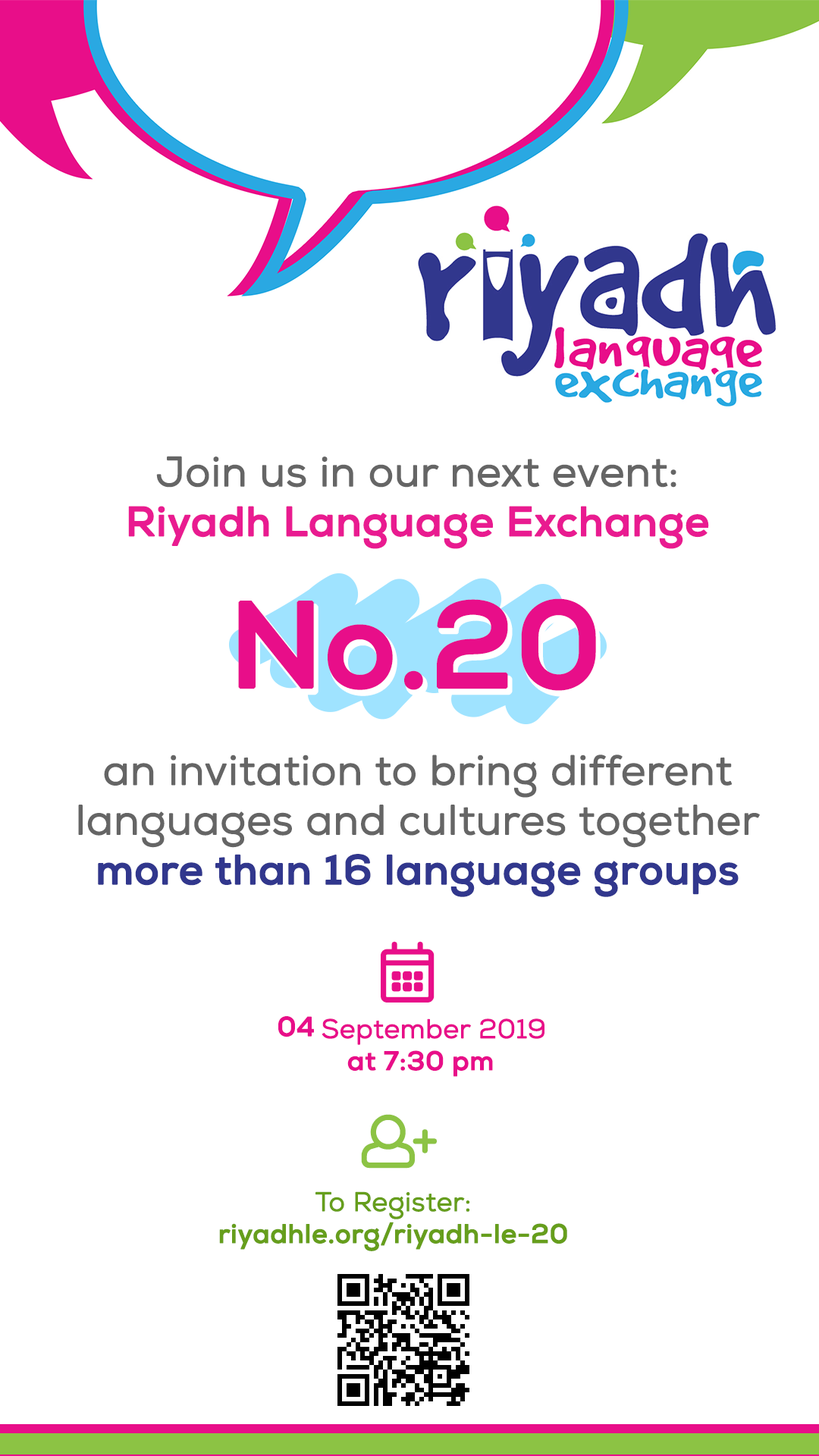
<style>
.page{position:relative;width:819px;height:1456px;background:#ffffff}
.page>*{position:absolute;margin:0}
.t1{font:41.5px "Nexa-Book";color:#656565;font-weight:bold}
.t2{font:41.5px "Nexa-Bold";color:#e91b90;font-weight:bold}
.t3{font:41.5px "Nexa-Bold";color:#31378d;font-weight:bold}
.t4{font:120.8px "Nexa-Bold";color:#e80e89;font-weight:bold}
.t5{font:27px "Nexa-Bold";color:#e80e89;font-weight:bold}
.t6{font:26.6px "Nexa-Book";color:#e80e89;font-weight:bold}
.t7{font:26.5px "Nexa-Bold";color:#e80e89;font-weight:bold}
.t8{font:26.6px "Nexa-Bold";color:#669e1c;font-weight:bold}
.t9{font:26.6px "Nexa-Book";color:#669e1c;font-weight:bold}
</style>
<div class="page">
<p class="t1" style="left:78px;top:456px;width:682px;height:441px;text-align:center">:Join us in our next event<br><span class="t2">Riyadh Language Exchange<br></span><br><br><br><br>an invitation to bring different languages and cultures together<br><span class="t3">more than 16 language groups</span></p>
<p class="t4" style="left:238px;top:598px;width:358px;height:93px">No.20</p>
<p class="t5" style="left:278px;top:1016px;width:36px;height:21px">04</p>
<p class="t6" style="left:322px;top:1018px;width:222px;height:27px">2019 September</p>
<p class="t7" style="left:347px;top:1050px;width:146px;height:27px">at 7:30 pm</p>
<p class="t8" style="left:219px;top:1191px;width:348px;height:60px;text-align:center"><span class="t9">:To Register<br></span>riyadhle.org/riyadh-le-20</p>
</div>
